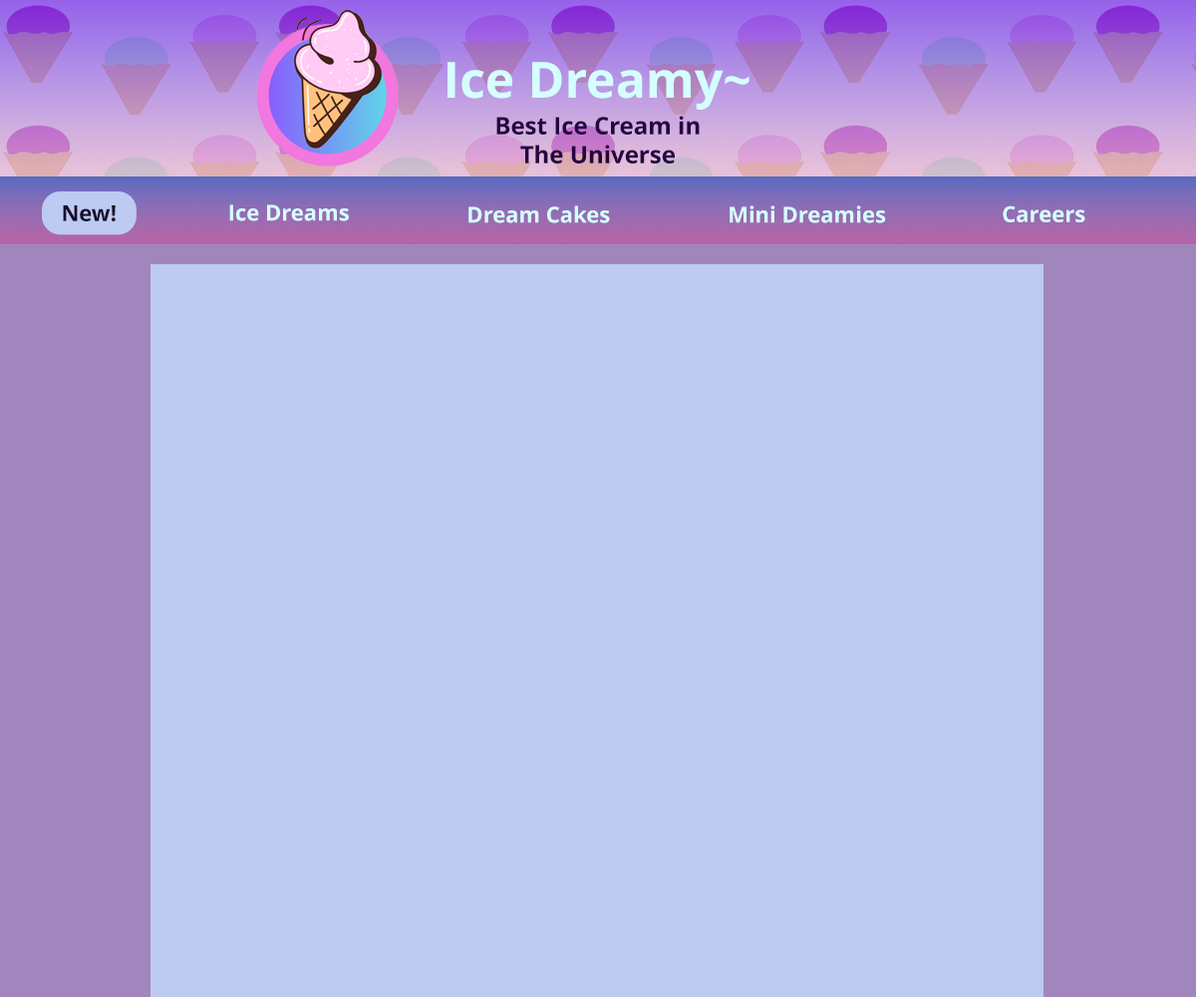
<style>
.page{position:relative;width:1196px;height:997px;background:#bdcaf2}
.page>*{position:absolute;margin:0}
.t1{font:49.8px "OpenSans-Bold";color:#d5fffe}
.t2{font:23.9px "OpenSans-Bold";color:#250444}
.t3{font:21.9px "OpenSans-Bold";color:#160d2a}
.t4{font:21.9px "OpenSans-Bold";color:#d5fffe}
</style>
<div class="page">
<p class="t1" style="left:448px;top:62px;width:302px;height:48px">Ice Dreamy~</p>
<p class="t2" style="left:496px;top:116px;width:204px;height:47px;text-align:center">Best Ice Cream in<br>The Universe</p>
<p class="t3" style="left:63px;top:205px;width:53px;height:16px">New!</p>
<p class="t4" style="left:229px;top:204px;width:120px;height:17px">Ice Dreams</p>
<p class="t4" style="left:469px;top:205px;width:141px;height:18px">Dream Cakes</p>
<p class="t4" style="left:730px;top:205px;width:156px;height:18px">Mini Dreamies</p>
<p class="t4" style="left:1003px;top:205px;width:83px;height:17px">Careers</p>
</div>
